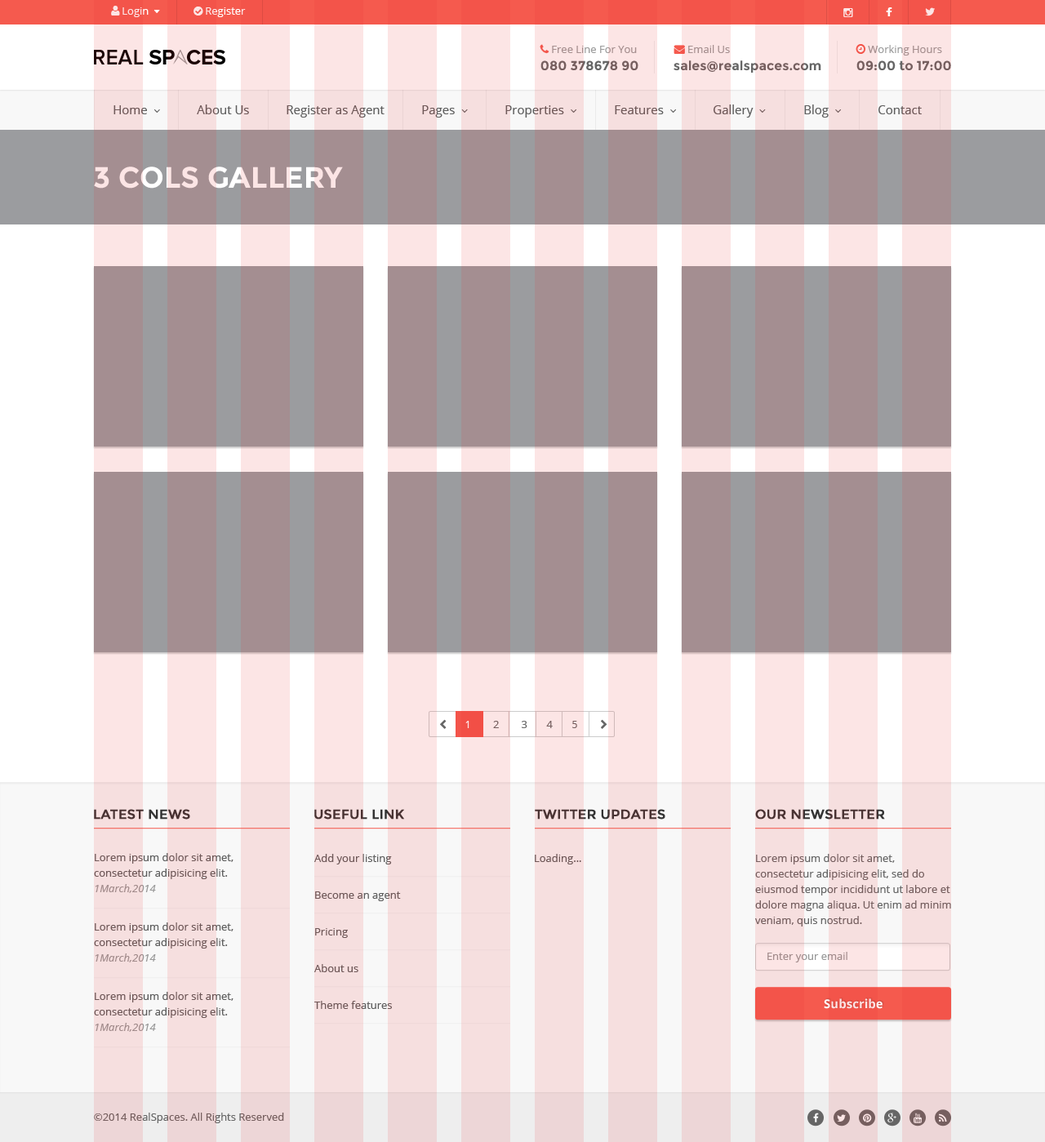
<style>
.page{position:relative;width:1045px;height:1142px;background:#a48e91}
.page>*{position:absolute;margin:0}
.t1{font:13.1px "Montserrat-Bold";color:#666666}
.t2{font:12.2px "OpenSans";color:#5e5e5e}
.t3{font:29.4px "Montserrat-Bold"}
.t4{font:13.1px "Montserrat-Regular";color:#333333;font-weight:bold}
.t5{font:10.6px/15.5px "OpenSans";color:#5e5e5e}
.t6{font:10.6px/15.5px "OpenSans-Italic";color:#999999}
.t7{font:10.6px/36.7px "OpenSans";color:#5e5e5e}
.t8{font:10.6px "OpenSans";color:#5e5e5e}
.t9{font:10.6px/15.5px "OpenSans";color:#666666}
.t10{font:10.6px "OpenSans";color:#999999}
.t11{font:12.2px "OpenSans-Bold";color:#fce5e5}
.t12{font:10.6px "OpenSans";color:#666666}
</style>
<div class="page">
<p class="t1" style="left:540px;top:60px;width:98px;height:11px">080 378678 90</p>
<p class="t1" style="left:673px;top:60px;width:148px;height:13px">sales@realspaces.com</p>
<p class="t1" style="left:856px;top:60px;width:95px;height:11px">09:00 to 17:00</p>
<p class="t2" style="left:197px;top:104px;width:52px;height:10px">About Us</p>
<p class="t2" style="left:286px;top:105px;width:98px;height:13px">Register as Agent</p>
<p class="t2" style="left:878px;top:105px;width:43px;height:9px">Contact</p>
<p class="t3" style="left:94px;top:166px;width:249px;height:23px">3 COLS GALLERY</p>
<p class="t4" style="left:94px;top:809px;width:96px;height:10px">LATEST NEWS</p>
<p class="t4" style="left:314px;top:809px;width:90px;height:10px">USEFUL LINK</p>
<p class="t4" style="left:534px;top:809px;width:131px;height:10px">TWITTER UPDATES</p>
<p class="t4" style="left:755px;top:809px;width:130px;height:10px">OUR NEWSLETTER</p>
<p class="t5" style="left:94px;top:853px;width:139px;height:40px">Lorem ipsum dolor sit amet, consectetur adipisicing elit.<br><span class="t6">1March,2014</span></p>
<p class="t7" style="left:314px;top:854px;width:87px;height:155px">Add your listing<br>Become an agent<br>Pricing<br>About us<br>Theme features</p>
<p class="t8" style="left:534px;top:854px;width:47px;height:10px">Loading...</p>
<p class="t9" style="left:755px;top:854px;width:196px;height:72px">Lorem ipsum dolor sit amet, consectetur adipisicing elit, sed do eiusmod tempor incididunt ut labore et dolore magna aliqua. Ut enim ad minim veniam, quis nostrud.</p>
<p class="t5" style="left:94px;top:922px;width:139px;height:40px">Lorem ipsum dolor sit amet, consectetur adipisicing elit.<br><span class="t6">1March,2014</span></p>
<p class="t10" style="left:767px;top:951px;width:80px;height:11px">Enter your email</p>
<p class="t5" style="left:94px;top:991px;width:139px;height:40px">Lorem ipsum dolor sit amet, consectetur adipisicing elit.<br><span class="t6">1March,2014</span></p>
<p class="t11" style="left:823px;top:998px;width:59px;height:11px">Subscribe</p>
<p class="t12" style="left:94px;top:1112px;width:190px;height:11px">©2014 RealSpaces. All Rights Reserved</p>
</div>
